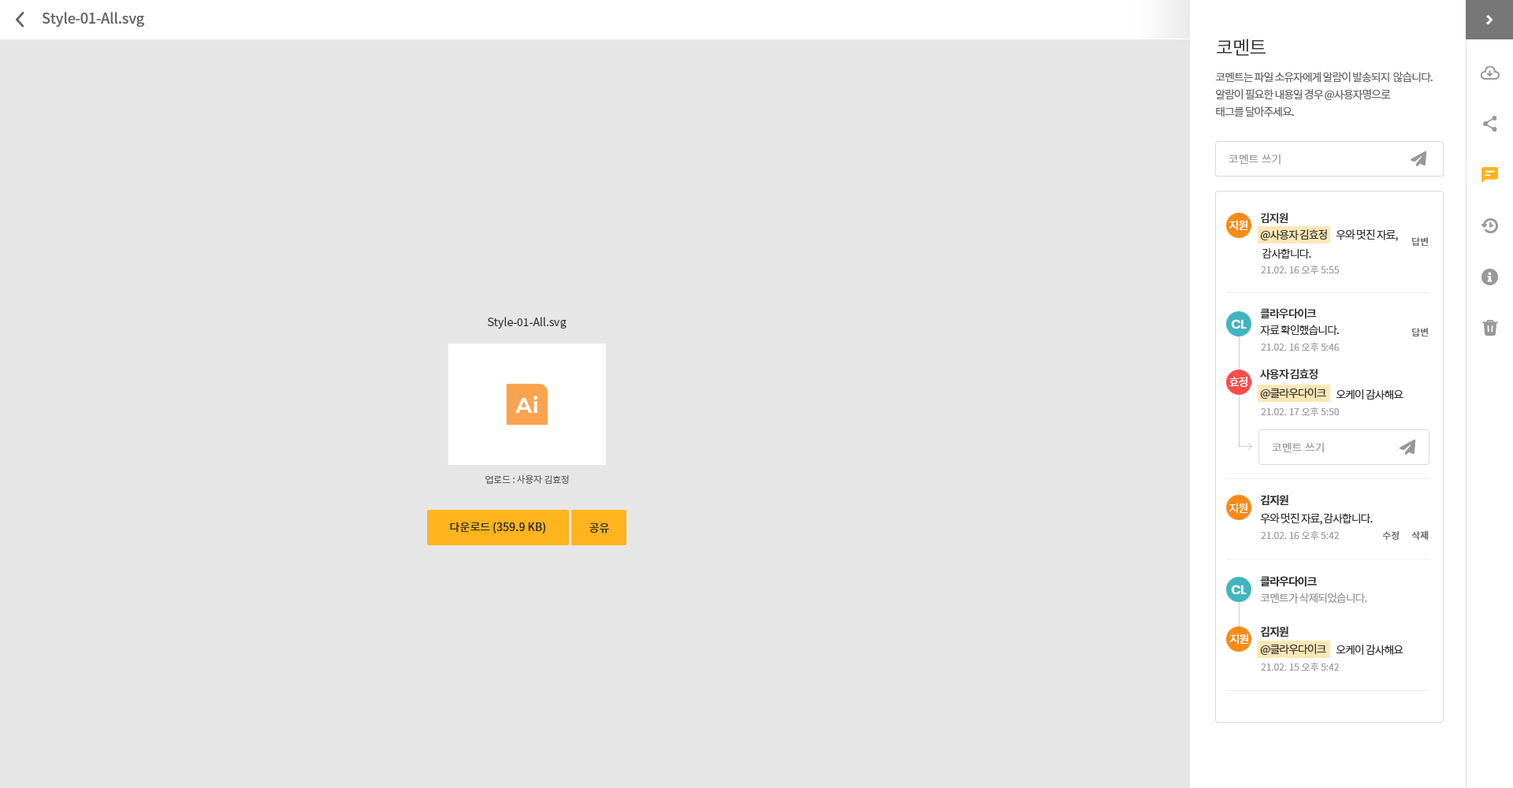
<style>
.page{position:relative;width:1513px;height:788px;background:#e6e6e6}
.page>*{position:absolute;margin:0}
.t1{font:14.2px "NotoSansCJKkr-Medium";letter-spacing:-0.01em;color:#666666}
.t2{font:18.9px "NotoSansCJKkr-DemiLight";letter-spacing:-0.05em;color:#333333}
.t3{font:11px/17.3px "NotoSansCJKkr-Regular";letter-spacing:-0.075em;color:#666666}
.t4{font:11px "NotoSansCJKkr-DemiLight";color:#999999}
.t5{font:11px "NotoSansCJKkr-Medium";letter-spacing:-0.05em;color:#ffffff}
.t6{font:11px "NotoSansCJKkr-Bold";letter-spacing:-0.075em;color:#333333}
.t7{font:11px "NotoSansCJKkr-Regular";letter-spacing:-0.075em;color:#333333}
.t8{font:9.5px "NotoSansCJKkr-Medium";color:#666666}
.t9{font:9.5px "NotoSansCJKkr-DemiLight";color:#999999}
.t10{font:11px "NotoSansCJKkr-Regular";color:#333333}
.t11{font:12.6px "Poppins-SemiBold";letter-spacing:-0.05em;color:#ffffff}
.t12{font:9.5px "NotoSansCJKkr-Regular";letter-spacing:-0.025em;color:#666666}
.t13{font:11px "NotoSansCJKkr-Regular";letter-spacing:-0.05em;color:#ffffff}
.t14{font:11px "NotoSansCJKkr-Medium";color:#333333}
.t15{font:11px "NotoSansCJKkr-Regular";letter-spacing:-0.075em;color:#999999}
</style>
<div class="page">
<p class="t1" style="left:43px;top:12px;width:101px;height:15px">Style-01-All.svg</p>
<p class="t2" style="left:1217px;top:39px;width:49px;height:17px">코멘트</p>
<p class="t3" style="left:1215px;top:72px;width:218px;height:45px">코멘트는 파일 소유자에게 알람이 발송되지  않습니다.<br>알람이 필요한 내용일 경우 @사용자명으로<br>태그를 달아주세요.</p>
<p class="t4" style="left:1229px;top:154px;width:52px;height:11px">코멘트 쓰기</p>
<p class="t5" style="left:1229px;top:220px;width:19px;height:11px">지원</p>
<p class="t6" style="left:1261px;top:213px;width:27px;height:11px">김지원</p>
<p class="t7" style="left:1260px;top:229px;width:67px;height:11px">@사용자 김효정</p>
<p class="t7" style="left:1336px;top:229px;width:62px;height:12px">우와 멋진 자료,</p>
<p class="t8" style="left:1412px;top:237px;width:16px;height:9px">답변</p>
<p class="t7" style="left:1262px;top:248px;width:49px;height:11px">감사합니다.</p>
<p class="t9" style="left:1261px;top:266px;width:78px;height:8px">21.02. 16 오후 5:55</p>
<p class="t10" style="left:488px;top:317px;width:79px;height:12px">Style-01-All.svg</p>
<p class="t6" style="left:1260px;top:308px;width:57px;height:11px">클라우다이크</p>
<p class="t11" style="left:1231px;top:319px;width:16px;height:10px">CL</p>
<p class="t7" style="left:1260px;top:325px;width:79px;height:11px">자료 확인했습니다.</p>
<p class="t8" style="left:1412px;top:328px;width:16px;height:9px">답변</p>
<p class="t9" style="left:1261px;top:343px;width:78px;height:8px">21.02. 16 오후 5:46</p>
<p class="t5" style="left:1229px;top:377px;width:19px;height:10px">효정</p>
<p class="t6" style="left:1260px;top:369px;width:58px;height:11px">사용자 김효정</p>
<p class="t7" style="left:1260px;top:388px;width:66px;height:11px">@클라우다이크</p>
<p class="t7" style="left:1336px;top:389px;width:68px;height:11px">오케이 감사해요</p>
<p class="t9" style="left:1261px;top:407px;width:78px;height:9px">21.02. 17 오후 5:50</p>
<p class="t4" style="left:1272px;top:442px;width:52px;height:11px">코멘트 쓰기</p>
<p class="t12" style="left:485px;top:474px;width:84px;height:10px">업로드 : 사용자 김효정</p>
<p class="t6" style="left:1260px;top:495px;width:28px;height:11px">김지원</p>
<p class="t13" style="left:1229px;top:503px;width:19px;height:11px">지원</p>
<p class="t14" style="left:450px;top:522px;width:95px;height:12px">다운로드 (359.9 KB)</p>
<p class="t7" style="left:1260px;top:513px;width:113px;height:12px">우와 멋진 자료, 감사합니다.</p>
<p class="t14" style="left:589px;top:523px;width:20px;height:11px">공유</p>
<p class="t9" style="left:1261px;top:531px;width:78px;height:9px">21.02. 16 오후 5:42</p>
<p class="t8" style="left:1382px;top:531px;width:17px;height:9px">수정</p>
<p class="t8" style="left:1411px;top:531px;width:18px;height:9px">삭제</p>
<p class="t6" style="left:1260px;top:576px;width:57px;height:11px">클라우다이크</p>
<p class="t11" style="left:1231px;top:585px;width:16px;height:9px">CL</p>
<p class="t15" style="left:1260px;top:593px;width:107px;height:11px">코멘트가 삭제되었습니다.</p>
<p class="t6" style="left:1260px;top:627px;width:28px;height:11px">김지원</p>
<p class="t5" style="left:1230px;top:634px;width:19px;height:11px">지원</p>
<p class="t7" style="left:1260px;top:644px;width:66px;height:11px">@클라우다이크</p>
<p class="t7" style="left:1336px;top:645px;width:68px;height:11px">오케이 감사해요</p>
<p class="t9" style="left:1261px;top:663px;width:78px;height:8px">21.02. 15 오후 5:42</p>
</div>
